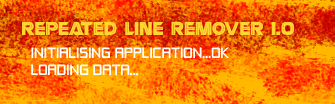
<style>
.page{position:relative;width:335px;height:104px}
.page>*{position:absolute;margin:0}
.t1{font:16px "Battlestar";color:#ffd52f}
.t2{font:14px "ZeroThrees";color:#ffffff}
</style>
<div class="page">
<p class="t1" style="left:22px;top:21px;width:272px;height:14px">REPEATED LINE REMOVER 1.0</p>
<p class="t2" style="left:31px;top:47px;width:198px;height:29px">INITIALISING APPLICATION...OK<br>LOADING DATA...</p>
</div>
